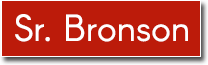
<style>
.page{position:relative;width:208px;height:65px;background:#bc1b0a}
.page>*{position:absolute;margin:0}
.t1{font:37px "Arcon-Regular";color:#ffffff}
</style>
<div class="page">
<p class="t1" style="left:15px;top:14px;width:173px;height:28px">Sr. Bronson</p>
</div>
